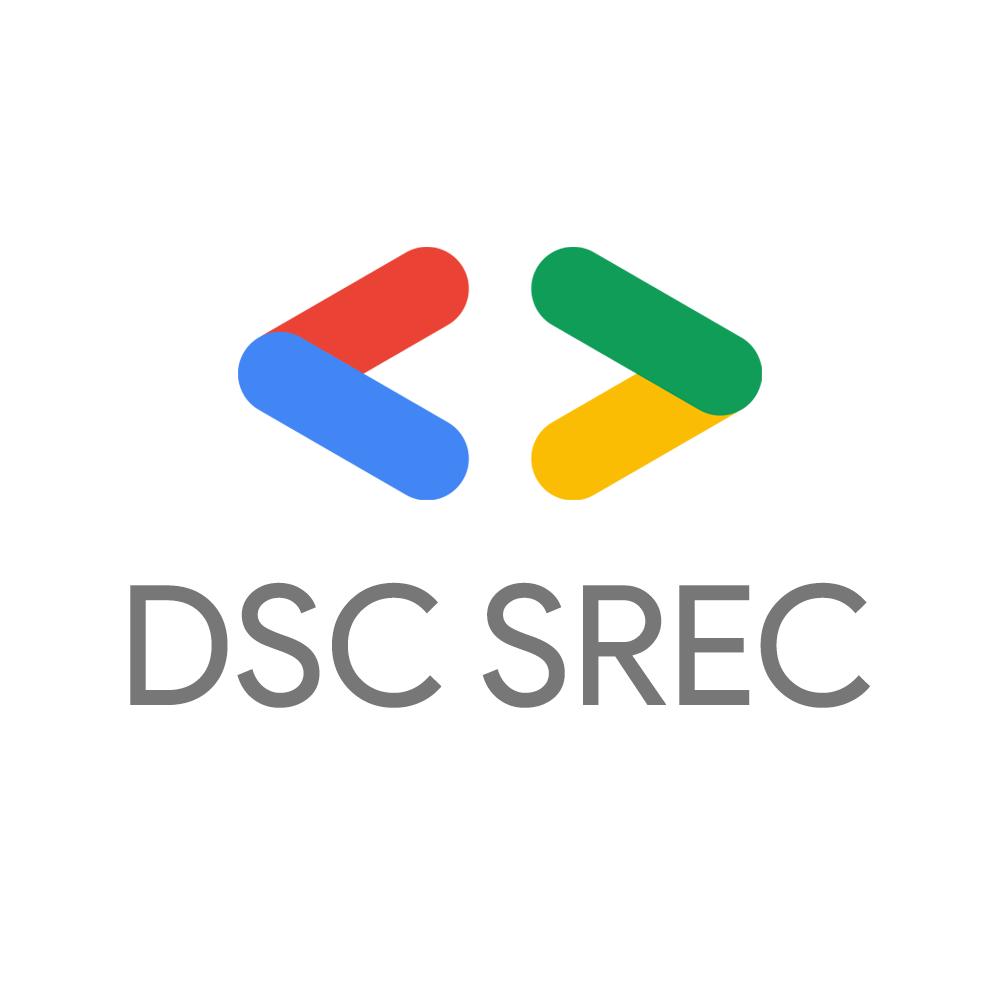
<style>
.page{position:relative;width:1000px;height:1000px;background:#ffffff}
.page>*{position:absolute;margin:0}
.t1{font:166.7px "ProductSans-Regular";color:#777777}
</style>
<div class="page">
<p class="t1" style="left:130px;top:582px;width:740px;height:126px">DSC SREC</p>
</div>
